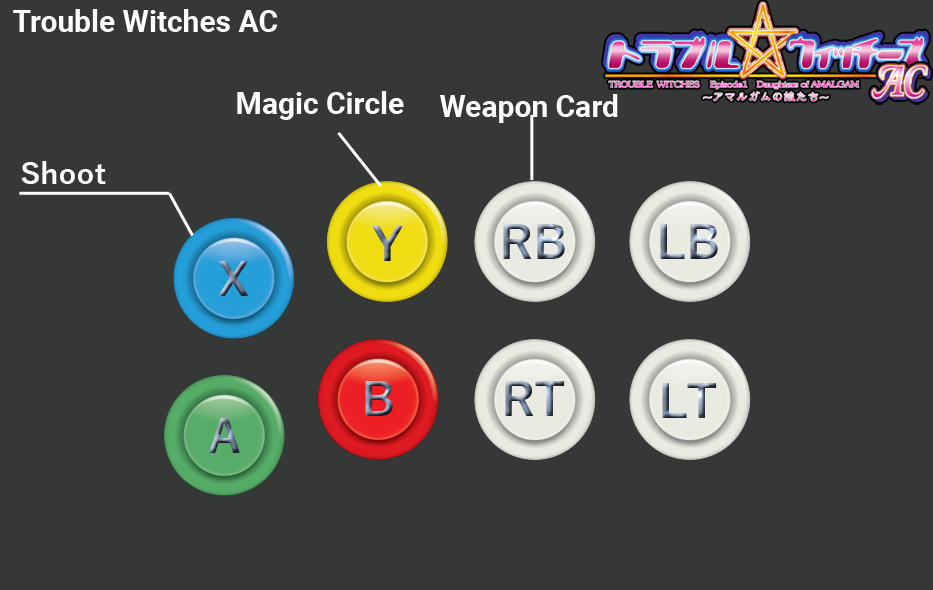
<style>
.page{position:relative;width:933px;height:590px;background:#363838}
.page>*{position:absolute;margin:0}
.t1{font:30px "Roboto-Bold";color:#ffffff}
.t2{font:30px "YuGothic-Bold";color:#ffffff}
</style>
<div class="page">
<p class="t1" style="left:13px;top:9px;width:265px;height:23px">Trouble Witches AC</p>
<p class="t1" style="left:237px;top:91px;width:167px;height:29px">Magic Circle</p>
<p class="t1" style="left:440px;top:94px;width:178px;height:29px">Weapon Card</p>
<p class="t2" style="left:21px;top:161px;width:85px;height:23px">Shoot</p>
</div>
